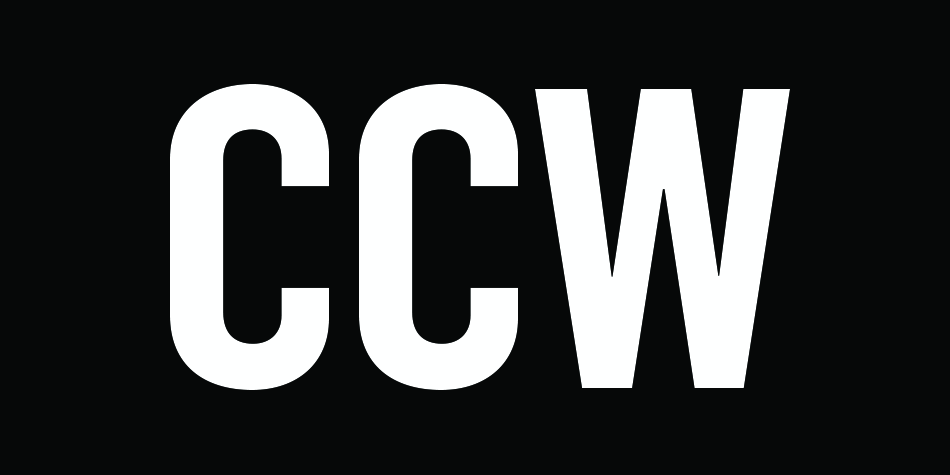
<style>
.page{position:relative;width:950px;height:475px;background:#060808}
.page>*{position:absolute;margin:0}
.t1{font:416.7px "FlamaCondensed-Semibold";color:#feffff}
</style>
<div class="page">
<p class="t1" style="left:170px;top:84px;width:620px;height:306px">CCW</p>
</div>
